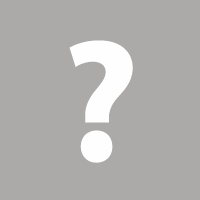
<style>
.page{position:relative;width:200px;height:200px;background:#aca9a9}
.page>*{position:absolute;margin:0}
.t1{font:175px "MyriadPro-Bold";letter-spacing:-0.03em;color:#fffefe}
</style>
<div class="page">
<p class="t1" style="left:69px;top:40px;width:64px;height:123px">?</p>
</div>
